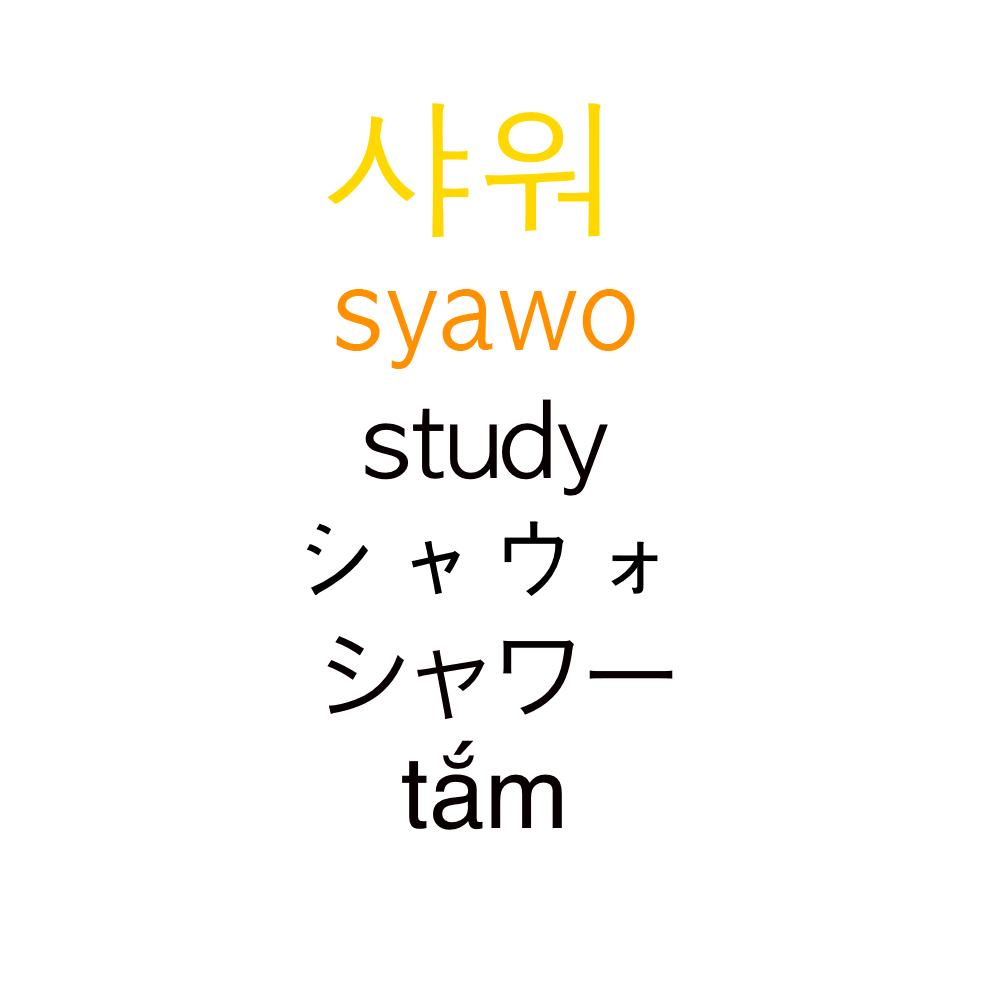
<style>
.page{position:relative;width:1000px;height:1000px;background:#ffffff}
.page>*{position:absolute;margin:0}
.t1{font:150px "AppleGothic";color:#ffd800}
.t2{font:111.2px "AppleGothic";color:#ff9000;scale:0.9 1}
.t3{font:100px "AppleGothic";color:#080000}
.t4{font:100px "AppleGothic";color:#000000}
.t5{font:100px "HiraKakuProN-W3";color:#080000}
.t6{font:100px "Helvetica";color:#080000}
</style>
<div class="page">
<p class="t1" style="left:328px;top:103px;width:273px;height:135px">샤워</p>
<p class="t2" style="left:336px;top:289px;width:299px;height:80px">syawo</p>
<p class="t3" style="left:365px;top:399px;width:243px;height:97px">study</p>
<p class="t4" style="left:307px;top:521px;width:351px;height:75px">シャウォ</p>
<p class="t5" style="left:327px;top:636px;width:346px;height:83px">シャワー</p>
<p class="t6" style="left:402px;top:740px;width:160px;height:90px">tắm</p>
</div>
